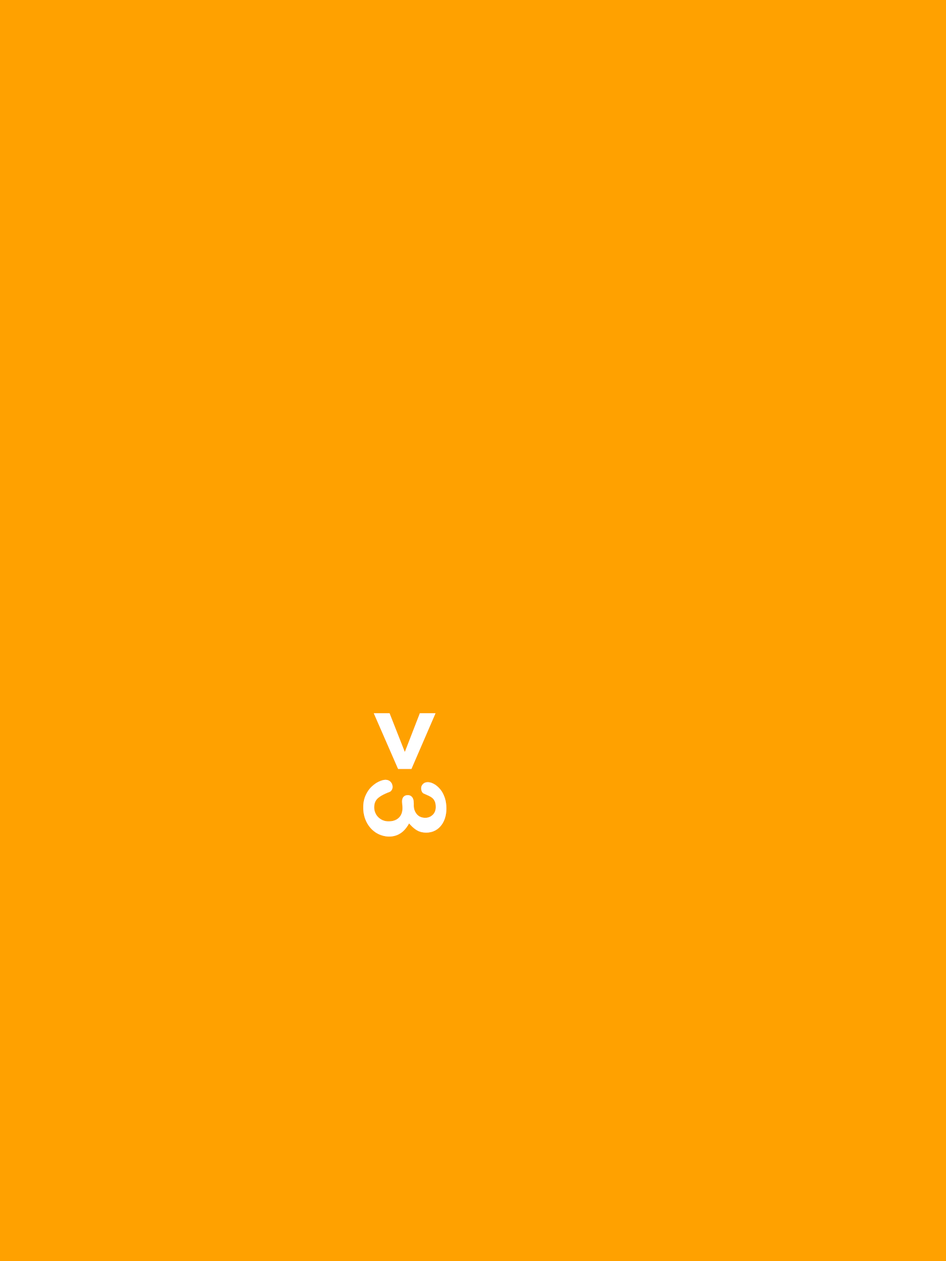
<style>
.page{position:relative;width:946px;height:1261px;background:#ffa100}
.page>*{position:absolute;margin:0}
.t1{font:113.5px "ArialRoundedMTBold";color:#ffffff}
</style>
<div class="page">
<p class="t1" style="left:363px;top:713px;width:83px;height:124px;rotate:90deg">&gt;3</p>
</div>
